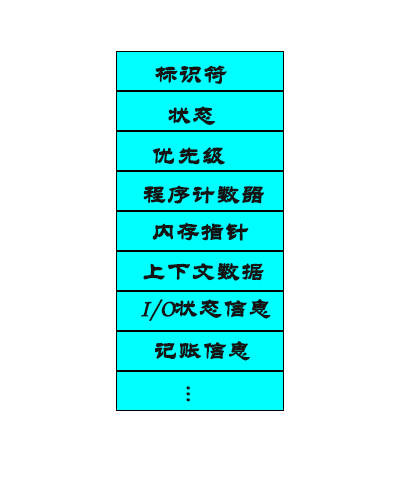
<style>
.page{position:relative;width:400px;height:500px;background:#ffffff}
.page>*{position:absolute;margin:0}
.t1{font:24px "STLiti";color:#141414;font-weight:bold}
</style>
<div class="page">
<p class="t1" style="left:155px;top:65px;width:72px;height:19px">标识符</p>
<p class="t1" style="left:168px;top:106px;width:48px;height:19px">状态</p>
<p class="t1" style="left:153px;top:147px;width:72px;height:18px">优先级</p>
<p class="t1" style="left:143px;top:185px;width:122px;height:19px">程序计数器</p>
<p class="t1" style="left:152px;top:222px;width:97px;height:19px">内存指针</p>
<p class="t1" style="left:143px;top:263px;width:121px;height:18px">上下文数据</p>
<p class="t1" style="left:141px;top:299px;width:130px;height:22px">I/O状态信息</p>
<p class="t1" style="left:155px;top:341px;width:95px;height:20px">记账信息</p>
<p class="t1" style="left:186px;top:386px;width:4px;height:16px">...</p>
</div>
